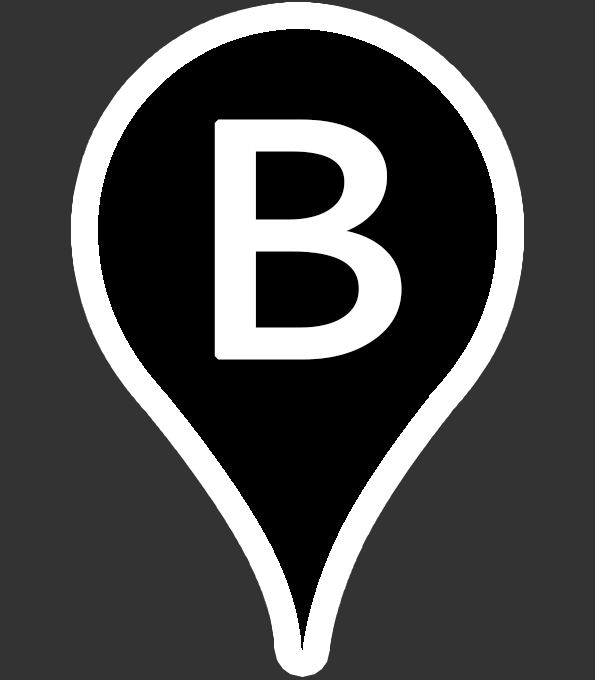
<style>
.page{position:relative;width:595px;height:680px;background:#333333}
.page>*{position:absolute;margin:0}
.t1{font:333.4px "MicrosoftNewTaiLue";color:#ffffff;font-weight:bold;scale:1.25 1}
</style>
<div class="page">
<p class="t1" style="left:214px;top:119px;width:188px;height:241px">B</p>
</div>
